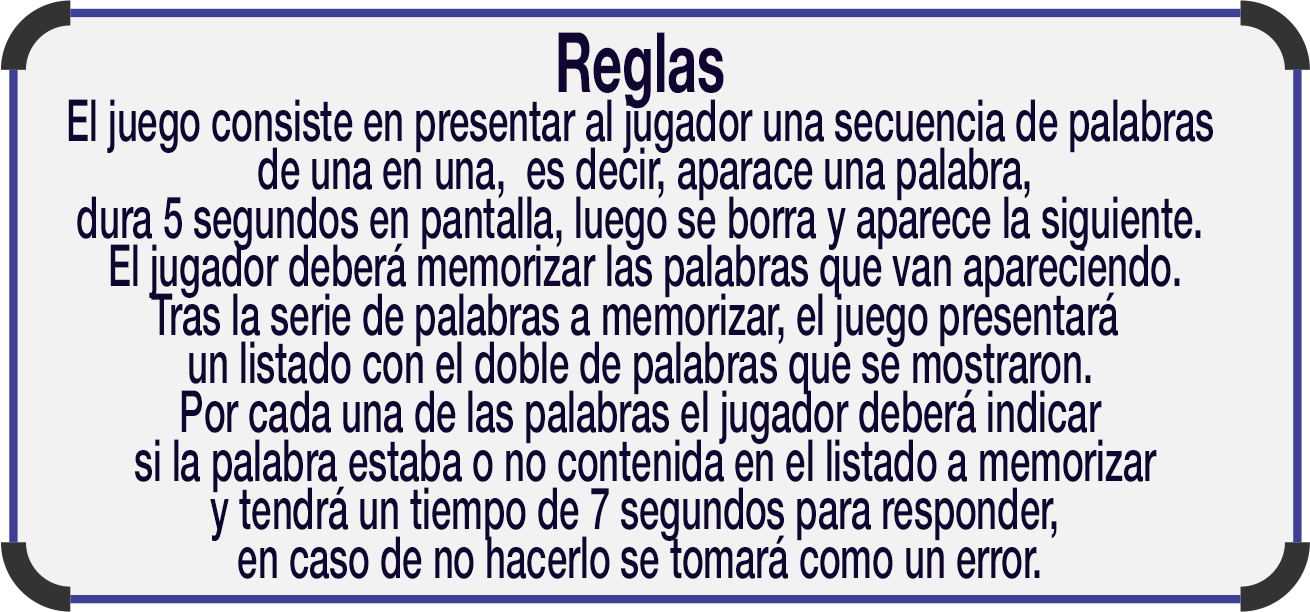
<style>
.page{position:relative;width:1310px;height:612px;background:#f2f2f3}
.page>*{position:absolute;margin:0}
.t1{font:58.3px/45.8px "HelveticaNeue-Medium";color:#100430;scale:0.62 1}
.t2{font:83.3px/83.3px "HelveticaNeue-Bold";color:#100430;scale:0.62 1}
</style>
<div class="page">
<p class="t1" style="left:68px;top:32px;width:1145px;height:547px;text-align:center"><span class="t2">Reglas<br></span>El juego consiste en presentar al jugador una secuencia de palabras<br> de una en una,  es decir, aparace una palabra,<br>dura 5 segundos en pantalla, luego se borra y aparece la siguiente.<br> El jugador deberá memorizar las palabras que van apareciendo.<br>Tras la serie de palabras a memorizar, el juego presentará <br>un listado con el doble de palabras que se mostraron.<br>Por cada una de las palabras el jugador deberá indicar<br> si la palabra estaba o no contenida en el listado a memorizar<br>y tendrá un tiempo de 7 segundos para responder, <br>en caso de no hacerlo se tomará como un error.</p>
</div>
